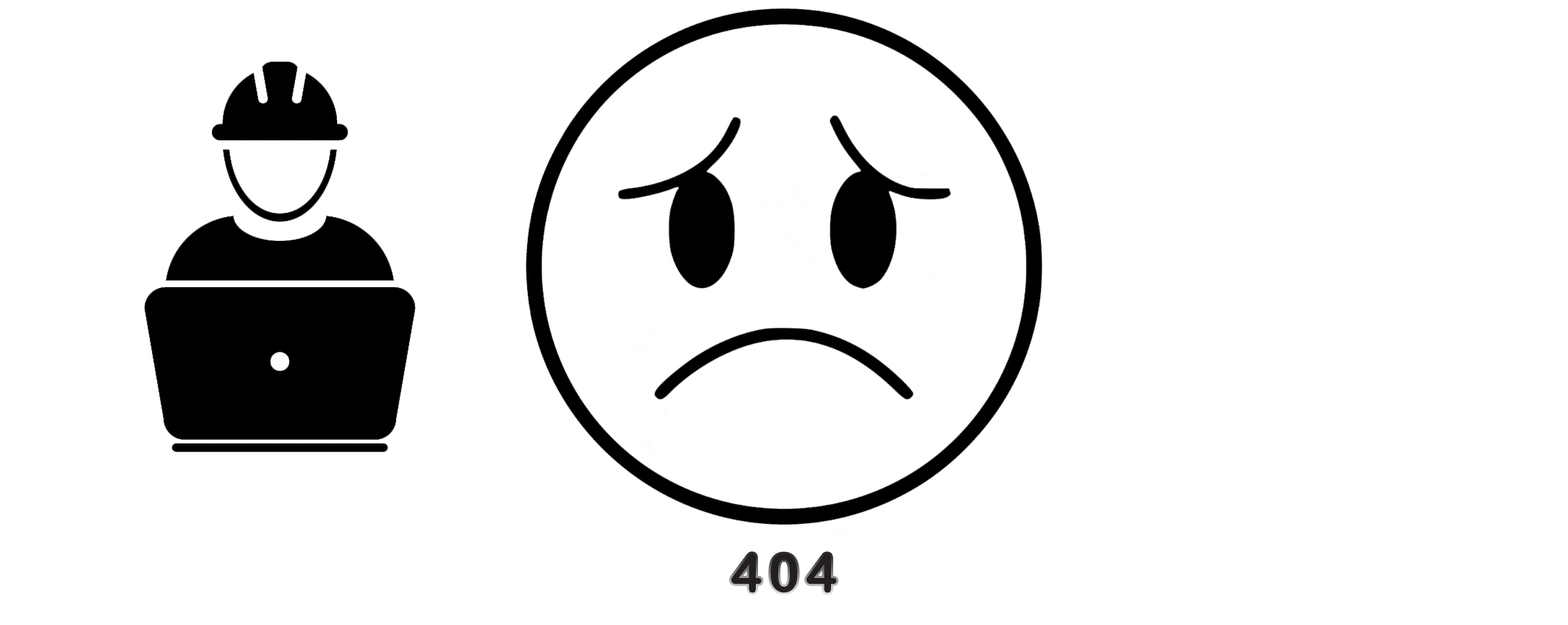
<style>
.page{position:relative;width:1568px;height:625px;background:#ffffff}
.page>*{position:absolute;margin:0}
.t1{font:52.1px "ArialRoundedMTBold";letter-spacing:0.1em;color:#231f20;font-variant:small-caps;font-weight:bold}
</style>
<div class="page">
<p class="t1" style="left:731px;top:553px;width:106px;height:40px">404</p>
</div>
